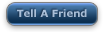
<style>
.page{position:relative;width:105px;height:32px}
.page>*{position:absolute;margin:0}
.t1{font:10px "Verdana-Bold";color:#a8bed7}
</style>
<div class="page">
<p class="t1" style="left:17px;top:9px;width:70px;height:8px">Tell A Friend</p>
</div>
